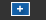
<style>
.page{position:relative;width:46px;height:20px;background:#333333}
.page>*{position:absolute;margin:0}
.t1{font:12px "CenturyGothic-Bold";letter-spacing:0.03em;color:#fefefe}
</style>
<div class="page">
<p class="t1" style="left:17px;top:5px;width:6px;height:7px">+</p>
</div>
